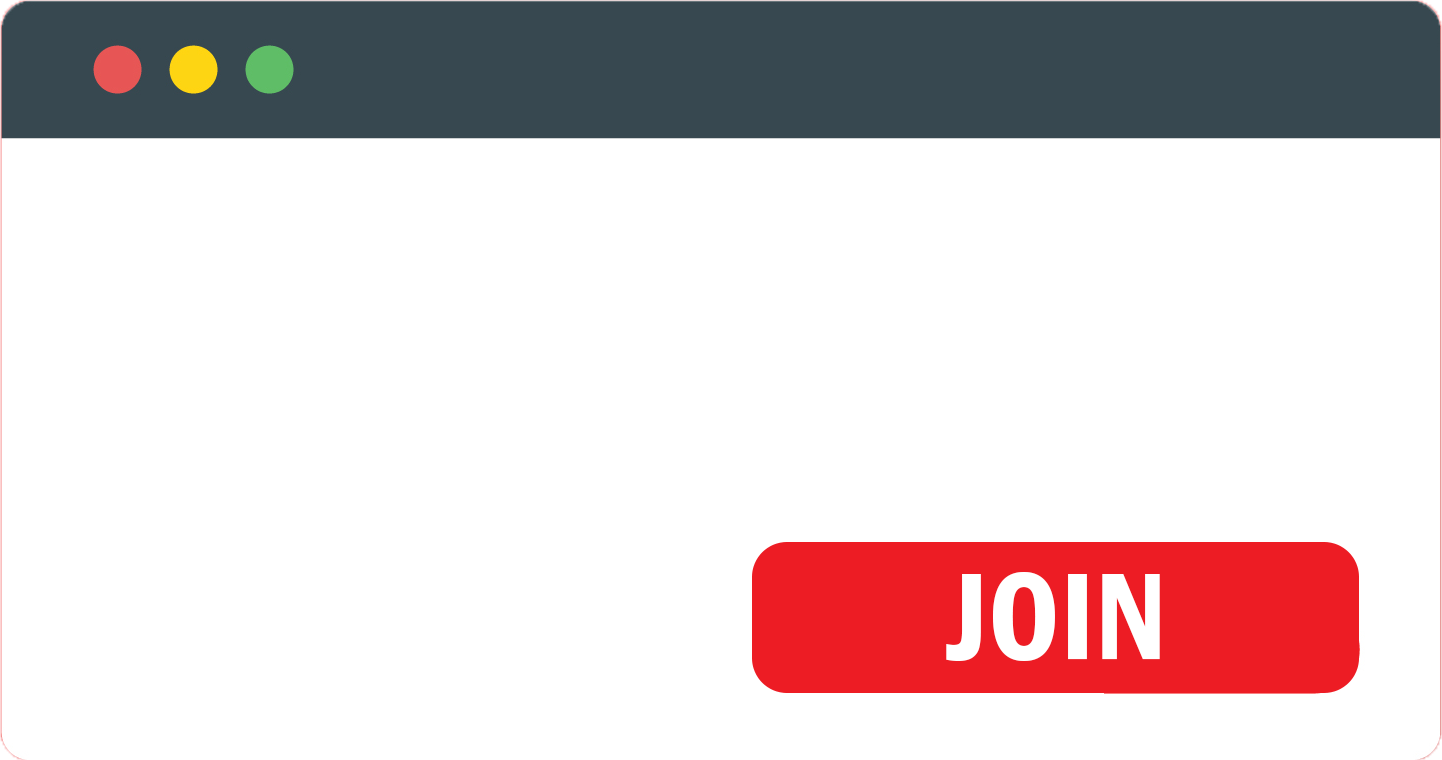
<style>
.page{position:relative;width:1442px;height:760px;background:#ffffff}
.page>*{position:absolute;margin:0}
.t1{font:128px "FranklinGothic-DemiCond";color:#ffffff}
</style>
<div class="page">
<p class="t1" style="left:946px;top:572px;width:214px;height:89px">JOIN</p>
</div>
